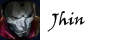
<style>
.page{position:relative;width:140px;height:40px;background:#ffffff}
.page>*{position:absolute;margin:0}
.t1{font:12px "VinerHandITC";color:#000000}
</style>
<div class="page">
<p class="t1" style="left:47px;top:11px;width:38px;height:21px">Jhin</p>
</div>
